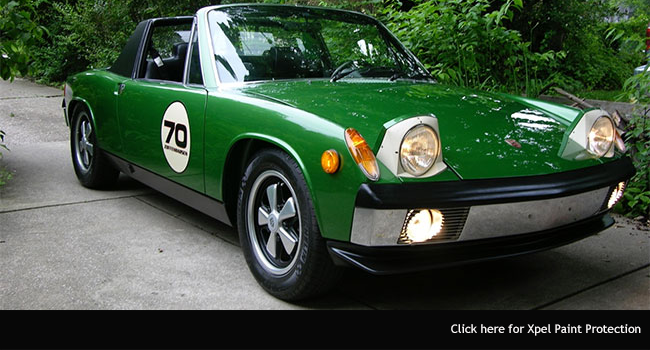
<style>
.page{position:relative;width:650px;height:350px}
.page>*{position:absolute;margin:0}
.t1{font:12px "TrebuchetMS";color:#fcf9f9}
</style>
<div class="page">
<p class="t1" style="left:451px;top:324px;width:190px;height:12px">Click here for Xpel Paint Protection</p>
</div>
